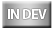
<style>
.page{position:relative;width:53px;height:30px;background:#ffffff}
.page>*{position:absolute;margin:0}
.t1{font:14px "MyriadPro-Bold";letter-spacing:-0.04em;color:#ffffff}
</style>
<div class="page">
<p class="t1" style="left:8px;top:9px;width:39px;height:10px">IN DEV</p>
</div>
